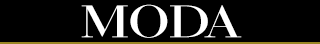
<style>
.page{position:relative;width:320px;height:44px;background:#000000}
.page>*{position:absolute;margin:0}
.t1{font:48px "BauerBodoniBT-Roman";color:#ffffff;scale:1.29 1}
</style>
<div class="page">
<p class="t1" style="left:81px;top:4px;width:161px;height:34px">MODA</p>
</div>
